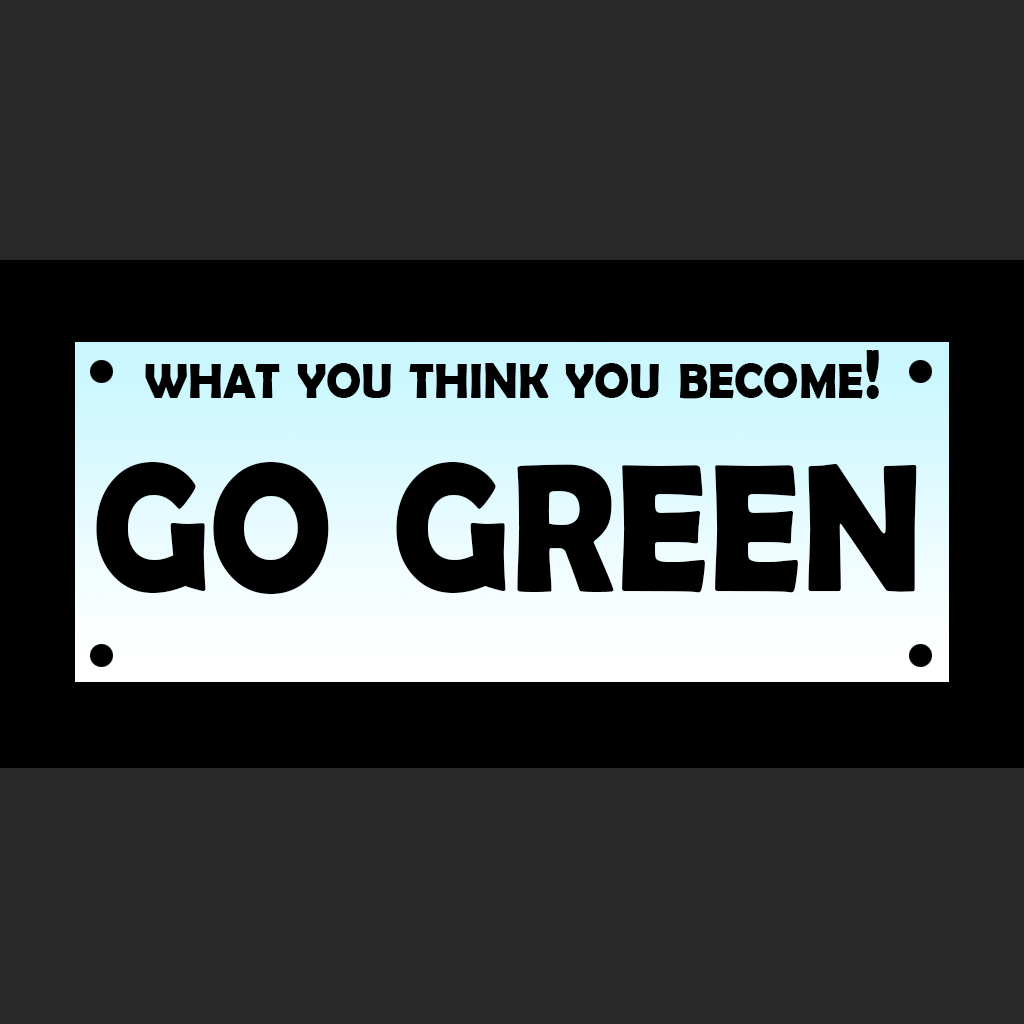
<style>
.page{position:relative;width:1024px;height:1024px;background:#282828}
.page>*{position:absolute;margin:0}
.t1{font:69.7px "BerlinSansFBDemi-Bold";color:#000000;font-variant:small-caps;scale:0.96 1}
.t2{font:262.6px "BerlinSansFBDemi-Bold";color:#000000;font-variant:small-caps;scale:0.9 1}
</style>
<div class="page">
<p class="t1" style="left:145px;top:350px;width:734px;height:49px">what you think you become!</p>
<p class="t2" style="left:96px;top:462px;width:821px;height:132px">go green</p>
</div>
